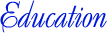
<style>
.page{position:relative;width:107px;height:33px;background:#ffffff}
.page>*{position:absolute;margin:0}
.t1{font:36px "UkrainianDecor";color:#0019d7}
</style>
<div class="page">
<p class="t1" style="left:0px;top:0px;width:107px;height:33px">Education</p>
</div>
